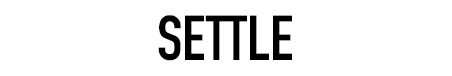
<style>
.page{position:relative;width:452px;height:76px;background:#ffffff}
.page>*{position:absolute;margin:0}
.t1{font:62.5px "DINCondensed-Bold";color:#000000}
</style>
<div class="page">
<p class="t1" style="left:158px;top:15px;width:134px;height:46px">SETTLE</p>
</div>
